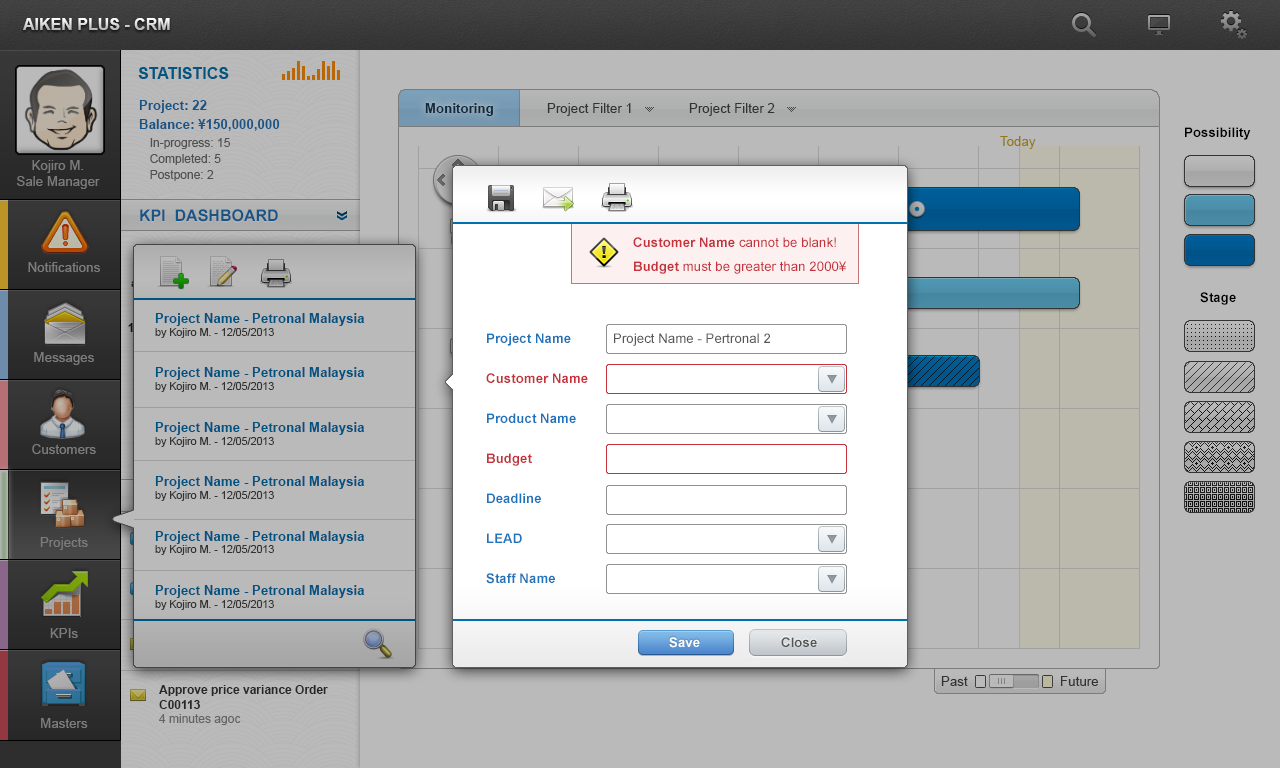
<style>
.page{position:relative;width:1280px;height:768px;background:#bababa}
.page>*{position:absolute;margin:0}
.t1{font:16px "Arial-BoldMT";text-transform:uppercase}
.t2{font:16px "Arial-BoldMT";color:#005680;text-transform:uppercase}
.t3{font:13.3px/18.7px "Arial-BoldMT"}
.t4{font:12px/18.7px "ArialMT"}
.t5{font:12px/16px "ArialMT"}
.t6{font:13.3px "Arial-BoldMT";color:#092c46}
.t7{font:13.3px "ArialMT";color:#464646}
.t8{font:13.3px "ArialMT";color:#95771f}
.t9{font:13.3px "Arial-BoldMT";color:#000000}
.t10{font:13.3px "ArialMT";color:#7c7c7c}
.t11{font:16px "Arial-BoldMT";color:#175488;text-transform:uppercase}
.t12{font:13.3px/24px "ArialMT";color:#c5323c}
.t13{font:13.3px/24px "Arial-BoldMT";color:#c5323c}
.t14{font:13.3px "Arial-BoldMT";color:#005281}
.t15{font:10.7px "ArialMT";color:#005281}
.t16{font:13.3px/40px "Arial-BoldMT";color:#1f73bb}
.t17{font:13.3px/40px "Arial-BoldMT";color:#1f73bb;text-transform:uppercase}
.t18{font:13.3px/40px "Arial-BoldMT";color:#c5323c}
.t19{font:13.3px "ArialMT";color:#555555}
.t20{font:13.3px "Arial-BoldMT";color:#ffffff}
.t21{font:13.3px "Arial-BoldMT";color:#555555}
</style>
<div class="page">
<p class="t1" style="left:23px;top:18px;width:147px;height:12px">AIKEN Plus - CRM</p>
<p class="t2" style="left:138px;top:67px;width:91px;height:12px">Statistics</p>
<p class="t3" style="left:139px;top:100px;width:141px;height:81px">Project: 22<br>Balance: ¥150,000,000<br><span class="t4">In-progress: 15<br></span><span class="t5">Completed: 5<br>Postpone: 2</span></p>
<p class="t6" style="left:425px;top:103px;width:68px;height:13px">Monitoring</p>
<p class="t7" style="left:547px;top:103px;width:84px;height:13px">Project Filter 1</p>
<p class="t7" style="left:689px;top:103px;width:86px;height:13px">Project Filter 2</p>
<p class="t8" style="left:1000px;top:136px;width:36px;height:13px">Today</p>
<p class="t9" style="left:1185px;top:127px;width:66px;height:13px">Possibility</p>
<p class="t10" style="left:17px;top:160px;width:83px;height:29px;text-align:center">Kojiro M.<br>Sale Manager</p>
<p class="t11" style="left:140px;top:209px;width:138px;height:13px">KPI  Dashboard</p>
<p class="t12" style="left:633px;top:237px;width:213px;height:37px"><span class="t13">Customer Name</span> cannot be blank!<br><span class="t13">Budget</span> must be greater than 2000¥</p>
<p class="t10" style="left:28px;top:262px;width:72px;height:10px">Notifications</p>
<p class="t9" style="left:1200px;top:292px;width:36px;height:13px">Stage</p>
<p class="t14" style="left:155px;top:313px;width:209px;height:297px">Project Name - Petronal Malaysia<br><span class="t15">by Kojiro M. - 12/05/2013<br><br><br></span>Project Name - Petronal Malaysia<br><span class="t15">by Kojiro M. - 12/05/2013<br><br><br></span>Project Name - Petronal Malaysia<br><span class="t15">by Kojiro M. - 12/05/2013<br><br><br></span>Project Name - Petronal Malaysia<br><span class="t15">by Kojiro M. - 12/05/2013<br><br><br></span>Project Name - Petronal Malaysia<br><span class="t15">by Kojiro M. - 12/05/2013<br><br><br></span>Project Name - Petronal Malaysia<br><span class="t15">by Kojiro M. - 12/05/2013</span></p>
<p class="t16" style="left:486px;top:333px;width:102px;height:251px"><span class="t17">P</span>roject Name<br><span class="t18">Customer Name<br></span>Product Name<br><span class="t18">Budget<br></span>Deadline<br>LEAD<br>Staff Name</p>
<p class="t19" style="left:614px;top:333px;width:156px;height:13px">Project Name - Pertronal 2</p>
<p class="t10" style="left:34px;top:352px;width:60px;height:13px">Messages</p>
<p class="t10" style="left:32px;top:444px;width:64px;height:10px">Customers</p>
<p class="t10" style="left:40px;top:537px;width:48px;height:13px">Projects</p>
<p class="t10" style="left:50px;top:628px;width:28px;height:10px">KPIs</p>
<p class="t20" style="left:669px;top:637px;width:31px;height:11px">Save</p>
<p class="t21" style="left:781px;top:637px;width:36px;height:10px">Close</p>
<p class="t7" style="left:941px;top:676px;width:157px;height:10px">Past      Future</p>
<p class="t10" style="left:41px;top:718px;width:47px;height:10px">Masters</p>
</div>
